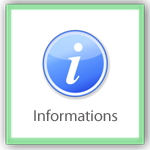
<style>
.page{position:relative;width:150px;height:150px;background:#ffffff}
.page>*{position:absolute;margin:0}
.t1{font:15.9px "MyriadPro-Regular";color:#615f5f}
</style>
<div class="page">
<p class="t1" style="left:34px;top:109px;width:84px;height:13px">Informations</p>
</div>
